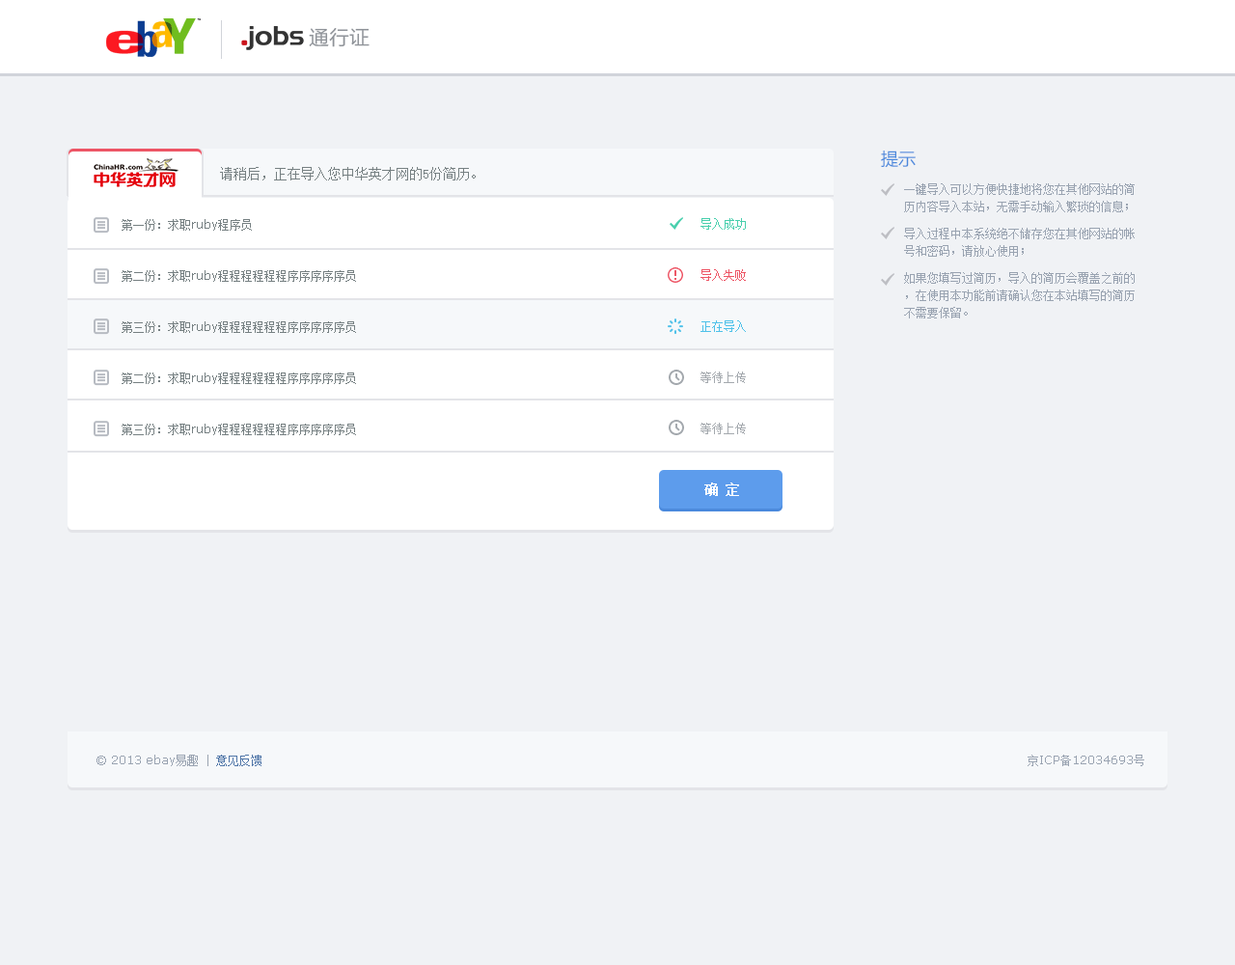
<style>
.page{position:relative;width:1235px;height:965px;background:#f0f2f5}
.page>*{position:absolute;margin:0}
.t1{font:20.3px "FZLTHJW--GB1-0";color:#8f9399}
.t2{font:17.4px "MicrosoftYaHei";color:#4b89dc}
.t3{font:13.5px "SimSun";color:#768082}
.t4{font:11.6px/17.4px "SimSun";color:#99a3b1}
.t5{font:11.6px/29px "SimSun";color:#768082}
.t6{font:11.6px/29px "Verdana";color:#768082}
.t7{font:11.6px/29px "SimSun";color:#a4a9ae}
.t8{font:11.6px/29px "SimSun";color:#48cfad}
.t9{font:11.6px/29px "SimSun";color:#ed5565}
.t10{font:11.6px/29px "SimSun";color:#4fc1e9}
.t11{font:13.5px "SimSun";color:#ffffff;text-transform:uppercase;font-weight:bold}
.t12{font:11.6px "Verdana";color:#99a3b1}
.t13{font:11.6px "SimSun";color:#99a3b1}
.t14{font:11.6px "SimSun";color:#5076a8}
</style>
<div class="page">
<p class="t1" style="left:309px;top:28px;width:61px;height:19px">通行证</p>
<p class="t2" style="left:881px;top:151px;width:35px;height:17px">提示</p>
<p class="t3" style="left:220px;top:167px;width:256px;height:13px">请稍后，正在导入您中华英才网的5份简历。</p>
<p class="t4" style="left:904px;top:183px;width:231px;height:136px">一键导入可以方便快捷地将您在其他网站的简历内容导入本站，无需手动输入繁琐的信息；<br>导入过程中本系统绝不储存您在其他网站的帐号和密码，请放心使用；<br>如果您填写过简历，导入的简历会覆盖之前的，在使用本功能前请确认您在本站填写的简历不需要保留。</p>
<p class="t5" style="left:122px;top:219px;width:234px;height:216px;text-align:justify">第一份：求职<span class="t6">ruby</span>程序员<br>第二份：求职<span class="t6">ruby</span>程程程程程程序序序序序员<br>第三份：求职<span class="t6">ruby</span>程程程程程程序序序序序员<br>第二份：求职<span class="t6">ruby</span>程程程程程程序序序序序员<br>第三份：求职<span class="t6">ruby</span>程程程程程程序序序序序员</p>
<p class="t7" style="left:701px;top:218px;width:45px;height:216px;text-align:justify"><span class="t8">导入成功<br></span><span class="t9">导入失败<br></span><span class="t10">正在导入<br></span>等待上传<br>等待上传</p>
<p class="t11" style="left:705px;top:483px;width:34px;height:13px">确 定</p>
<p class="t12" style="left:97px;top:755px;width:165px;height:11px">© 2013 ebay<span class="t13">易趣</span><span class="t13"> | </span><span class="t14">意见反馈</span></p>
<p class="t12" style="left:1028px;top:755px;width:117px;height:11px"><span class="t13">京</span>ICP<span class="t13">备</span>12034693<span class="t13">号</span></p>
</div>
